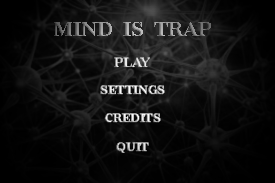
<style>
.page{position:relative;width:275px;height:183px}
.page>*{position:absolute;margin:0}
.t1{font:20px "Redaction50-Bold"}
.t2{font:13.4px "Redaction50-Bold"}
.t3{font:12px "Redaction50-Bold"}
</style>
<div class="page">
<p class="t1" style="left:54px;top:22px;width:157px;height:14px">MIND  IS  TRAP</p>
<p class="t2" style="left:114px;top:57px;width:36px;height:11px">PLAY</p>
<p class="t3" style="left:100px;top:85px;width:65px;height:10px">SETTINGS</p>
<p class="t3" style="left:104px;top:113px;width:57px;height:10px">CREDITS</p>
<p class="t3" style="left:116px;top:142px;width:33px;height:11px">QUIT</p>
</div>
